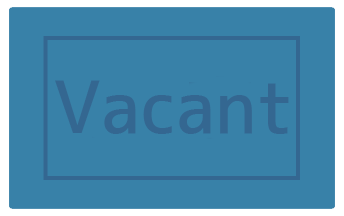
<style>
.page{position:relative;width:344px;height:216px;background:#3881a8}
.page>*{position:absolute;margin:0}
.t1{font:72px "JK-Gothic-M";color:#346791}
</style>
<div class="page">
<p class="t1" style="left:55px;top:80px;width:234px;height:54px">Vacant</p>
</div>
